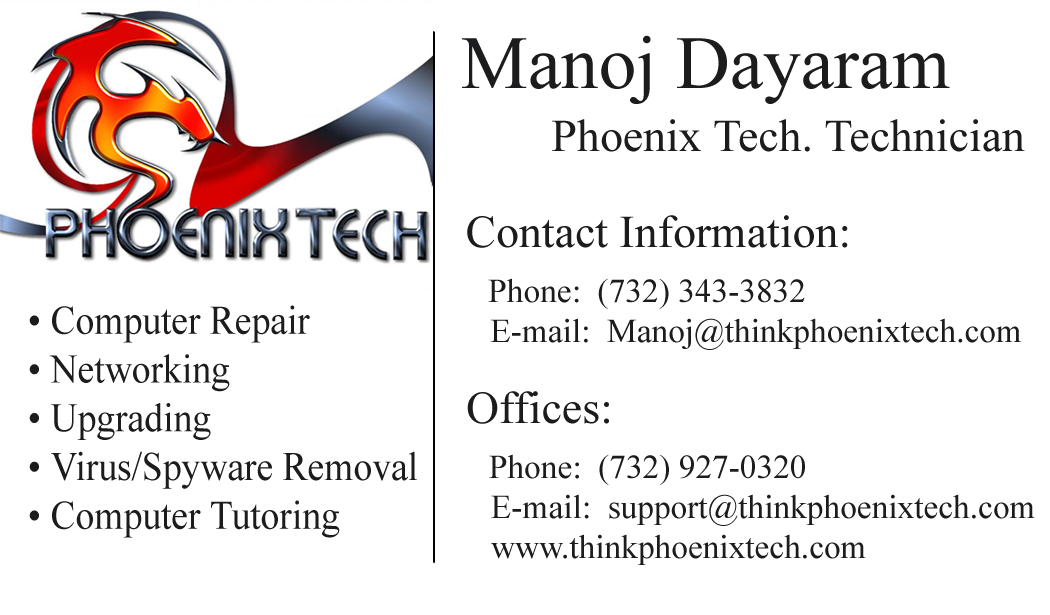
<style>
.page{position:relative;width:1050px;height:615px;background:#ffffff}
.page>*{position:absolute;margin:0}
.t1{font:75px "TimesNewRomanPSMT";color:#1c1b1d}
.t2{font:45.8px "TimesNewRomanPSMT";color:#1c1b1d}
.t3{font:33.3px "TimesNewRomanPSMT";color:#1c1b1d}
.t4{font:40.6px "TimesNewRomanPSMT";color:#1c1b1d;scale:0.92 1}
</style>
<div class="page">
<p class="t1" style="left:462px;top:35px;width:488px;height:69px">Manoj Dayaram</p>
<p class="t2" style="left:552px;top:119px;width:473px;height:33px">Phoenix Tech. Technician</p>
<p class="t3" style="left:467px;top:215px;width:554px;height:135px"><span class="t2">Contact Information:<br>  </span>Phone:  (732) 343-3832<br>   E-mail:  Manoj@thinkphoenixtech.com</p>
<p class="t4" style="left:29px;top:305px;width:388px;height:233px">• Computer Repair<br>• Networking<br>• Upgrading<br>• Virus/Spyware Removal<br>• Computer Tutoring</p>
<p class="t3" style="left:467px;top:391px;width:568px;height:174px"><span class="t2">Offices:<br>  </span>Phone:  (732) 927-0320<br>   E-mail:  support@thinkphoenixtech.com<br>   www.thinkphoenixtech.com</p>
</div>
